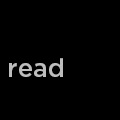
<style>
.page{position:relative;width:120px;height:120px;background:#000000}
.page>*{position:absolute;margin:0}
.t1{font:25.4px "Gotham-Medium";color:#bdbdbd}
</style>
<div class="page">
<p class="t1" style="left:9px;top:58px;width:54px;height:19px">read</p>
</div>
